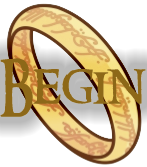
<style>
.page{position:relative;width:147px;height:167px;background:#ffffff}
.page>*{position:absolute;margin:0}
.t1{font:55.6px "RingbearerMedium";color:#8d6818}
</style>
<div class="page">
<p class="t1" style="left:0px;top:58px;width:146px;height:59px">Begin</p>
</div>
